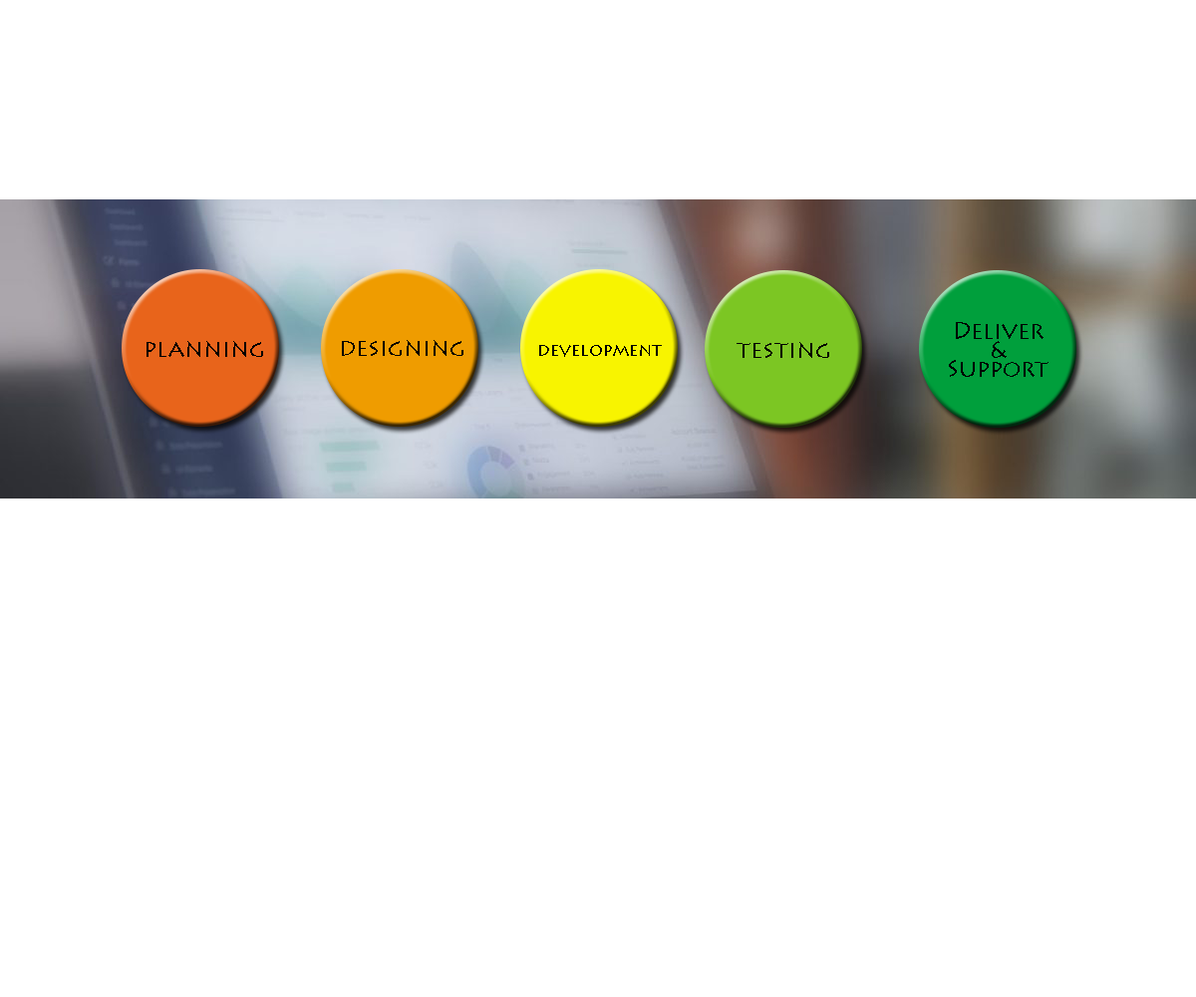
<style>
.page{position:relative;width:1196px;height:997px;background:#ffffff}
.page>*{position:absolute;margin:0}
.t1{font:23.9px/19.1px "LithosPro-Regular";color:#000000}
.t2{font:23.9px "LithosPro-Regular";color:#000000}
.t3{font:17.9px "LithosPro-Regular";color:#000000}
</style>
<div class="page">
<p class="t1" style="left:949px;top:322px;width:100px;height:55px;text-align:center">Deliver<br>&amp;<br>Support</p>
<p class="t2" style="left:147px;top:341px;width:116px;height:16px">planning</p>
<p class="t2" style="left:342px;top:340px;width:122px;height:16px">designing</p>
<p class="t2" style="left:737px;top:342px;width:92px;height:16px">testing</p>
<p class="t3" style="left:539px;top:345px;width:123px;height:12px">development</p>
</div>
